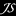
<style>
.page{position:relative;width:16px;height:16px;background:#000000}
.page>*{position:absolute;margin:0}
.t1{font:7.6px "Zapfino";color:#ffffff}
</style>
<div class="page">
<p class="t1" style="left:0px;top:3px;width:16px;height:12px">JS</p>
</div>
